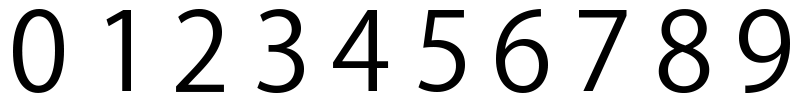
<style>
.page{position:relative;width:800px;height:100px;background:#ffffff}
.page>*{position:absolute;margin:0}
.t1{font:108.3px "KozGoPr6N-Regular";color:#000000}
</style>
<div class="page">
<p class="t1" style="left:13px;top:9px;width:51px;height:84px">0</p>
<p class="t1" style="left:106px;top:10px;width:25px;height:81px">1</p>
<p class="t1" style="left:176px;top:9px;width:48px;height:83px">2</p>
<p class="t1" style="left:257px;top:9px;width:47px;height:84px">3</p>
<p class="t1" style="left:333px;top:10px;width:56px;height:81px">4</p>
<p class="t1" style="left:418px;top:10px;width:47px;height:82px">5</p>
<p class="t1" style="left:496px;top:9px;width:52px;height:84px">6</p>
<p class="t1" style="left:579px;top:10px;width:48px;height:81px">7</p>
<p class="t1" style="left:658px;top:9px;width:52px;height:84px">8</p>
<p class="t1" style="left:739px;top:9px;width:51px;height:84px">9</p>
</div>
